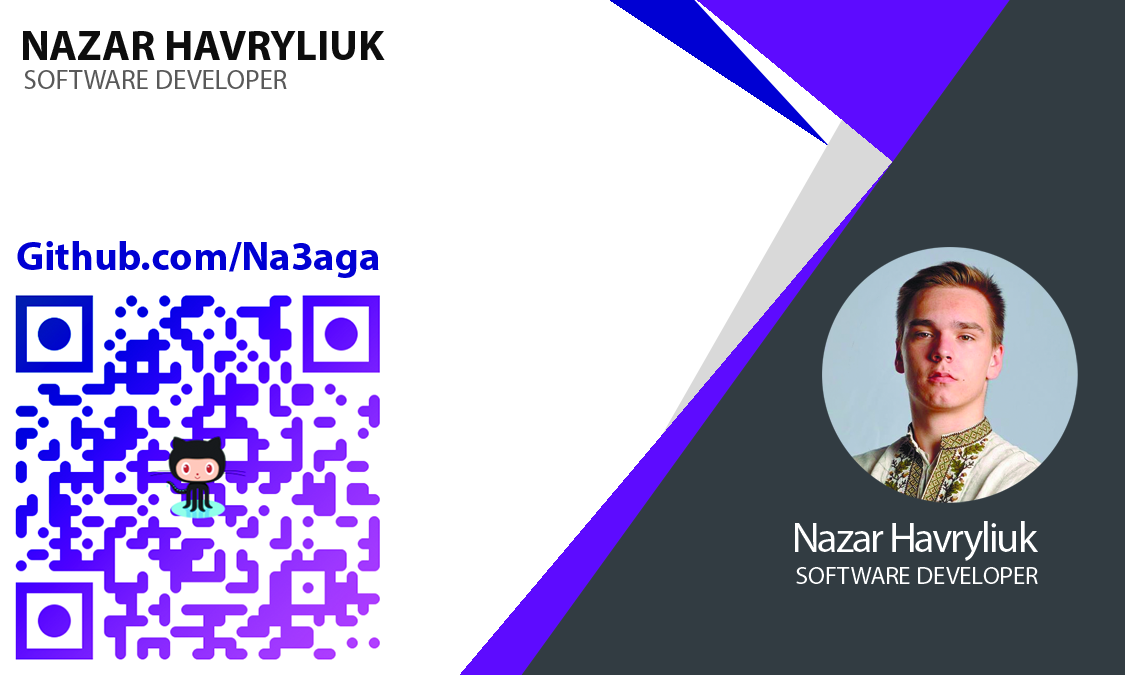
<style>
.page{position:relative;width:1125px;height:675px;background:#ffffff}
.page>*{position:absolute;margin:0}
.t1{font:42.6px "MyriadPro-Bold";color:#0d0d0d}
.t2{font:27.1px "MyriadPro-Regular";color:#595959}
.t3{font:40.8px "MyriadPro-Bold";color:#0000d3}
.t4{font:42.4px "MyriadPro-Regular";letter-spacing:-0.05em;color:#ffffff}
.t5{font:25px "MyriadPro-Regular";color:#ffffff}
</style>
<div class="page">
<p class="t1" style="left:23px;top:31px;width:362px;height:29px">NAZAR HAVRYLIUK</p>
<p class="t2" style="left:24px;top:70px;width:263px;height:19px">SOFTWARE DEVELOPER</p>
<p class="t3" style="left:17px;top:241px;width:362px;height:37px">Github.com/Na3aga</p>
<p class="t4" style="left:795px;top:521px;width:243px;height:40px">Nazar Havryliuk</p>
<p class="t5" style="left:796px;top:567px;width:242px;height:17px">SOFTWARE DEVELOPER</p>
</div>
